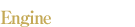
<style>
.page{position:relative;width:135px;height:27px;background:#ffffff}
.page>*{position:absolute;margin:0}
.t1{font:18px "RyuminPro-ExBold";letter-spacing:-0.08em;color:#c4a956}
</style>
<div class="page">
<p class="t1" style="left:0px;top:10px;width:51px;height:17px">Engine</p>
</div>
